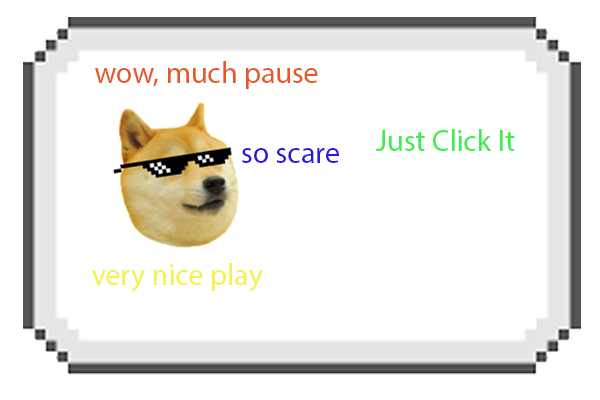
<style>
.page{position:relative;width:600px;height:400px;background:#ffffff}
.page>*{position:absolute;margin:0}
.t1{font:30px "MyriadPro-Regular";color:#e65826}
.t2{font:30px "MyriadPro-Regular";color:#3eec4e}
.t3{font:30px "MyriadPro-Regular";color:#2719e2}
.t4{font:30px "MyriadPro-Regular";color:#f1f347}
</style>
<div class="page">
<p class="t1" style="left:95px;top:61px;width:223px;height:28px">wow, much pause</p>
<p class="t2" style="left:376px;top:129px;width:139px;height:22px">Just Click It</p>
<p class="t3" style="left:242px;top:148px;width:97px;height:15px">so scare</p>
<p class="t4" style="left:92px;top:263px;width:171px;height:29px">very nice play</p>
</div>
